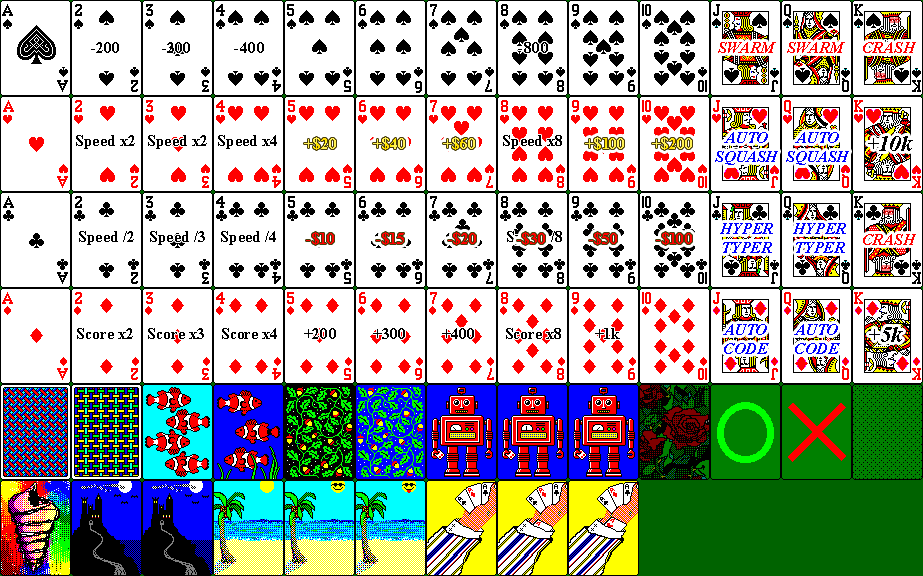
<style>
.page{position:relative;width:923px;height:576px;background:#ffffff}
.page>*{position:absolute;margin:0}
.t1{font:16px "TimesNewRomanPS-BoldMT";color:#000000}
.t2{font:16px "TimesNewRomanPS-BoldItalicMT";color:#ff0000}
.t3{font:16px "TimesNewRomanPS-BoldMT";color:#fff152}
.t4{font:16px "TimesNewRomanPS-BoldItalicMT";color:#0000ff}
.t5{font:23px "TimesNewRomanPS-BoldItalicMT";color:#000000}
.t6{font:16px "TimesNewRomanPS-BoldMT";color:#ff0000}
.t7{font:16px "TimesNewRomanPS-BoldMT"}
</style>
<div class="page">
<p class="t1" style="left:91px;top:42px;width:28px;height:11px">-200</p>
<p class="t1" style="left:162px;top:42px;width:28px;height:11px">-200</p>
<p class="t1" style="left:162px;top:42px;width:28px;height:11px">-300</p>
<p class="t1" style="left:234px;top:42px;width:30px;height:11px">-400</p>
<p class="t1" style="left:518px;top:42px;width:30px;height:11px">-800</p>
<p class="t2" style="left:718px;top:42px;width:58px;height:11px">SWARM</p>
<p class="t2" style="left:787px;top:42px;width:58px;height:11px">SWARM</p>
<p class="t2" style="left:863px;top:42px;width:53px;height:11px">CRASH</p>
<p class="t1" style="left:76px;top:135px;width:59px;height:14px">Speed x2</p>
<p class="t1" style="left:148px;top:135px;width:59px;height:14px">Speed x2</p>
<p class="t1" style="left:218px;top:135px;width:59px;height:14px">Speed x4</p>
<p class="t3" style="left:304px;top:137px;width:32px;height:13px">+$20</p>
<p class="t3" style="left:373px;top:137px;width:32px;height:13px">+$40</p>
<p class="t3" style="left:443px;top:137px;width:32px;height:13px">+$60</p>
<p class="t1" style="left:503px;top:135px;width:59px;height:14px">Speed x8</p>
<p class="t3" style="left:585px;top:137px;width:39px;height:13px">+$100</p>
<p class="t3" style="left:652px;top:137px;width:40px;height:13px">+$200</p>
<p class="t4" style="left:715px;top:132px;width:63px;height:33px;text-align:center">AUTO<br>SQUASH</p>
<p class="t4" style="left:786px;top:132px;width:63px;height:33px;text-align:center">AUTO<br>SQUASH</p>
<p class="t5" style="left:868px;top:136px;width:45px;height:15px">+10k</p>
<p class="t1" style="left:79px;top:231px;width:55px;height:14px">Speed /2</p>
<p class="t1" style="left:150px;top:231px;width:55px;height:14px">Speed /3</p>
<p class="t1" style="left:221px;top:231px;width:55px;height:14px">Speed /4</p>
<p class="t6" style="left:306px;top:232px;width:28px;height:13px">-$10</p>
<p class="t6" style="left:376px;top:232px;width:28px;height:13px">-$15</p>
<p class="t6" style="left:448px;top:232px;width:28px;height:13px">-$20</p>
<p class="t7" style="left:507px;top:231px;width:55px;height:14px">Speed /8</p>
<p class="t6" style="left:517px;top:232px;width:28px;height:13px">-$30</p>
<p class="t6" style="left:589px;top:232px;width:28px;height:13px">-$50</p>
<p class="t6" style="left:656px;top:232px;width:36px;height:13px">-$100</p>
<p class="t4" style="left:720px;top:223px;width:53px;height:30px;text-align:center">HYPER<br>TYPER</p>
<p class="t4" style="left:793px;top:223px;width:53px;height:30px;text-align:center">HYPER<br>TYPER</p>
<p class="t2" style="left:863px;top:234px;width:53px;height:11px">CRASH</p>
<p class="t1" style="left:77px;top:328px;width:56px;height:11px">Score x2</p>
<p class="t1" style="left:148px;top:328px;width:56px;height:11px">Score x3</p>
<p class="t1" style="left:222px;top:328px;width:55px;height:11px">Score x4</p>
<p class="t1" style="left:304px;top:328px;width:32px;height:11px">+200</p>
<p class="t1" style="left:373px;top:328px;width:32px;height:11px">+300</p>
<p class="t1" style="left:442px;top:328px;width:32px;height:11px">+400</p>
<p class="t1" style="left:506px;top:328px;width:55px;height:11px">Score x8</p>
<p class="t1" style="left:595px;top:328px;width:25px;height:11px">+1k</p>
<p class="t4" style="left:723px;top:324px;width:46px;height:30px;text-align:center">AUTO<br>CODE</p>
<p class="t4" style="left:794px;top:324px;width:46px;height:30px;text-align:center">AUTO<br>CODE</p>
<p class="t5" style="left:869px;top:327px;width:34px;height:15px">+5k</p>
</div>
